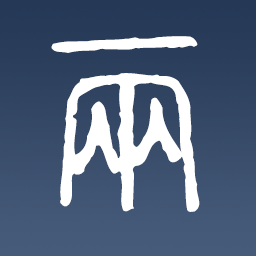
<style>
.page{position:relative;width:256px;height:256px}
.page>*{position:absolute;margin:0}
.t1{font:200px "EBAS";color:#ffffff}
</style>
<div class="page">
<p class="t1" style="left:51px;top:36px;width:149px;height:176px">兩</p>
</div>
